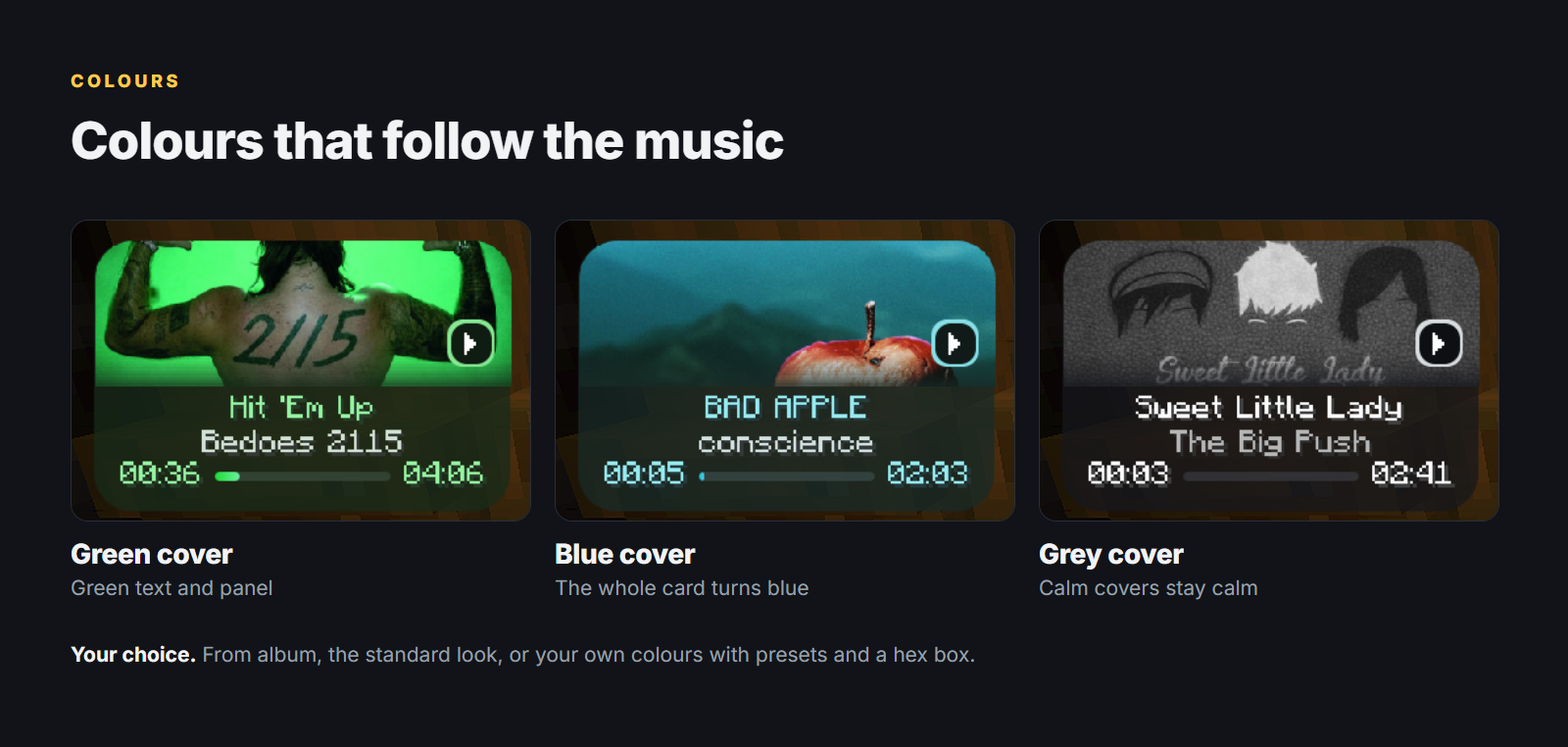
<style>
.page{position:relative;width:1568px;height:747px;background:#111318}
.page>*{position:absolute;margin:0}
.t1{font:17.6px "Inter-ExtraBold";letter-spacing:0.2em;color:#ffcc4d}
.t2{font:51px "Inter-ExtraBold";letter-spacing:-0.015em;color:#f2f3f5}
.t3{font:27.4px "Inter-ExtraBold";letter-spacing:-0.011em;color:#f2f3f5}
.t4{font:20.6px "Inter-Regular";color:#9aa0ab}
.t5{font:20.6px "Inter-Bold";color:#f2f3f5}
</style>
<div class="page">
<p class="t1" style="left:71px;top:74px;width:107px;height:14px">COLOURS</p>
<p class="t2" style="left:72px;top:119px;width:712px;height:41px">Colours that follow the music</p>
<p class="t3" style="left:71px;top:543px;width:162px;height:21px">Green cover</p>
<p class="t3" style="left:556px;top:543px;width:140px;height:21px">Blue cover</p>
<p class="t3" style="left:1039px;top:543px;width:145px;height:26px">Grey cover</p>
<p class="t4" style="left:71px;top:579px;width:201px;height:21px">Green text and panel</p>
<p class="t4" style="left:555px;top:579px;width:253px;height:17px">The whole card turns blue</p>
<p class="t4" style="left:1039px;top:579px;width:218px;height:21px">Calm covers stay calm</p>
<p class="t4" style="left:71px;top:645px;width:903px;height:21px"><span class="t5">Your choice.</span> From album, the standard look, or your own colours with presets and a hex box.</p>
</div>
